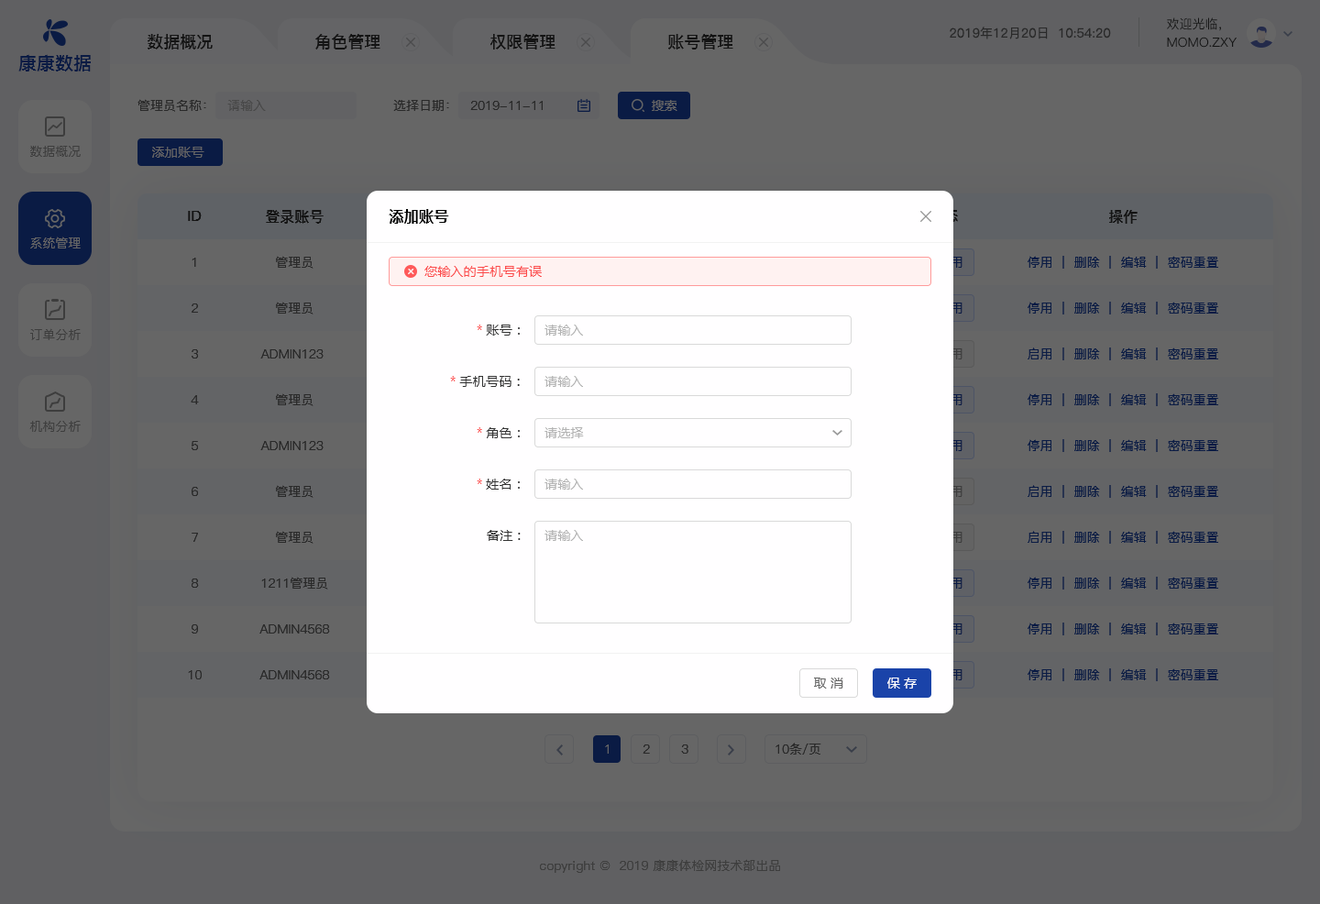
<style>
.page{position:relative;width:1320px;height:904px;background:#666666}
.page>*{position:absolute;margin:0}
.t1{font:12.8px "PingFang-SC-Medium";color:#141414;text-transform:uppercase}
.t2{font:12.8px "PingFang-SC-Regular";color:#292929}
.t3{font:16.5px "PingFang-SC-Bold";color:#141414;text-transform:uppercase}
.t4{font:18.3px "PingFangSC-Medium";color:#0a1b44;text-transform:uppercase}
.t5{font:12.8px "PingFang-SC-Medium";color:#292929}
.t6{font:12.8px "PingFang-SC-Medium";color:#484848}
.t7{font:12.8px "MicrosoftYaHei";letter-spacing:0.02em;color:#666666}
.t8{font:12.8px "PingFang-SC-Medium";color:#3d3d3d;text-transform:uppercase}
.t9{font:14.7px "PingFang-SC-Bold";color:#141414;text-transform:uppercase}
.t10{font:14.7px "MicrosoftYaHei-Bold";letter-spacing:0.02em;color:#000000}
.t11{font:12.8px "PingFang-SC-Medium";color:#666666;text-transform:uppercase}
.t12{font:12.8px "PingFang-SC-Medium";color:#292929;text-transform:uppercase}
.t13{font:12.8px "PingFang-SC-Medium";color:#0a1b44;text-transform:uppercase}
.t14{font:12.8px "MicrosoftYaHei";letter-spacing:0.02em;color:#fc4b4b}
.t15{font:12.8px "MicrosoftYaHei";letter-spacing:0.02em;color:#333333}
.t16{font:12.8px "MicrosoftYaHei";letter-spacing:0.02em;color:#b3b3b3}
.t17{font:12.8px "MicrosoftYaHei";letter-spacing:0.02em;color:#ffffff}
.t18{font:12.8px "PingFang-SC-Medium";color:#3d3d3d}
</style>
<div class="page">
<p class="t1" style="left:1167px;top:17px;width:54px;height:14px">欢迎光临，</p>
<p class="t2" style="left:949px;top:27px;width:162px;height:12px">2019年12月20日  10:54:20</p>
<p class="t3" style="left:148px;top:34px;width:65px;height:15px">数据概况</p>
<p class="t3" style="left:315px;top:34px;width:65px;height:15px">角色管理</p>
<p class="t3" style="left:490px;top:34px;width:65px;height:15px">权限管理</p>
<p class="t3" style="left:668px;top:34px;width:65px;height:15px">账号管理</p>
<p class="t1" style="left:1167px;top:37px;width:69px;height:11px">momo.zxy</p>
<p class="t4" style="left:18px;top:54px;width:73px;height:17px">康康数据</p>
<p class="t5" style="left:137px;top:99px;width:69px;height:13px">管理员名称：</p>
<p class="t6" style="left:227px;top:100px;width:39px;height:11px">请输入</p>
<p class="t5" style="left:393px;top:100px;width:56px;height:11px">选择日期：</p>
<p class="t5" style="left:470px;top:101px;width:73px;height:9px">2019-11-11</p>
<p class="t7" style="left:652px;top:100px;width:25px;height:11px">搜索</p>
<p class="t8" style="left:30px;top:146px;width:51px;height:11px">数据概况</p>
<p class="t7" style="left:152px;top:147px;width:52px;height:11px">添加账号</p>
<p class="t9" style="left:266px;top:210px;width:57px;height:14px">登录账号</p>
<p class="t10" style="left:389px;top:209px;width:60px;height:15px">添加账号</p>
<p class="t9" style="left:1109px;top:210px;width:28px;height:14px">操作</p>
<p class="t9" style="left:188px;top:211px;width:14px;height:10px">ID</p>
<p class="t11" style="left:30px;top:236px;width:51px;height:12px">系统管理</p>
<p class="t12" style="left:192px;top:258px;width:4px;height:9px">1</p>
<p class="t12" style="left:276px;top:256px;width:37px;height:13px">管理员</p>
<p class="t13" style="left:1027px;top:256px;width:191px;height:13px">停用  |  删除  |  编辑  |  密码重置</p>
<p class="t14" style="left:424px;top:266px;width:118px;height:11px">您输入的手机号有误</p>
<p class="t12" style="left:192px;top:303px;width:6px;height:10px">2</p>
<p class="t12" style="left:276px;top:302px;width:37px;height:12px">管理员</p>
<p class="t13" style="left:1027px;top:302px;width:191px;height:12px">停用  |  删除  |  编辑  |  密码重置</p>
<p class="t8" style="left:30px;top:328px;width:51px;height:12px">订单分析</p>
<p class="t15" style="left:477px;top:324px;width:43px;height:11px"><span class="t14">* </span>账号：</p>
<p class="t16" style="left:544px;top:324px;width:39px;height:11px">请输入</p>
<p class="t12" style="left:192px;top:349px;width:6px;height:9px">3</p>
<p class="t12" style="left:260px;top:349px;width:63px;height:9px">admin123</p>
<p class="t13" style="left:1027px;top:347px;width:191px;height:13px">启用  |  删除  |  编辑  |  密码重置</p>
<p class="t15" style="left:450px;top:376px;width:70px;height:11px"><span class="t14">* </span>手机号码：</p>
<p class="t16" style="left:544px;top:376px;width:39px;height:11px">请输入</p>
<p class="t12" style="left:191px;top:395px;width:8px;height:9px">4</p>
<p class="t12" style="left:276px;top:393px;width:37px;height:13px">管理员</p>
<p class="t13" style="left:1027px;top:393px;width:191px;height:13px">停用  |  删除  |  编辑  |  密码重置</p>
<p class="t8" style="left:29px;top:421px;width:52px;height:11px">机构分析</p>
<p class="t15" style="left:477px;top:427px;width:43px;height:11px"><span class="t14">* </span>角色：</p>
<p class="t16" style="left:544px;top:427px;width:40px;height:11px">请选择</p>
<p class="t12" style="left:192px;top:441px;width:6px;height:9px">5</p>
<p class="t12" style="left:260px;top:441px;width:63px;height:9px">admin123</p>
<p class="t13" style="left:1027px;top:439px;width:191px;height:13px">停用  |  删除  |  编辑  |  密码重置</p>
<p class="t12" style="left:276px;top:485px;width:37px;height:13px">管理员</p>
<p class="t15" style="left:477px;top:478px;width:43px;height:11px"><span class="t14">* </span>姓名：</p>
<p class="t16" style="left:544px;top:478px;width:39px;height:11px">请输入</p>
<p class="t13" style="left:1027px;top:485px;width:191px;height:13px">启用  |  删除  |  编辑  |  密码重置</p>
<p class="t12" style="left:192px;top:487px;width:6px;height:9px">6</p>
<p class="t12" style="left:192px;top:532px;width:6px;height:10px">7</p>
<p class="t12" style="left:276px;top:531px;width:37px;height:12px">管理员</p>
<p class="t15" style="left:487px;top:530px;width:34px;height:11px">备注：</p>
<p class="t16" style="left:544px;top:530px;width:39px;height:11px">请输入</p>
<p class="t13" style="left:1027px;top:531px;width:191px;height:12px">启用  |  删除  |  编辑  |  密码重置</p>
<p class="t12" style="left:192px;top:578px;width:7px;height:9px">8</p>
<p class="t12" style="left:261px;top:576px;width:67px;height:13px">1211管理员</p>
<p class="t13" style="left:1027px;top:576px;width:191px;height:13px">停用  |  删除  |  编辑  |  密码重置</p>
<p class="t12" style="left:192px;top:624px;width:6px;height:9px">9</p>
<p class="t12" style="left:259px;top:624px;width:71px;height:9px">admin4568</p>
<p class="t13" style="left:1027px;top:622px;width:191px;height:13px">停用  |  删除  |  编辑  |  密码重置</p>
<p class="t12" style="left:188px;top:670px;width:14px;height:9px">10</p>
<p class="t12" style="left:259px;top:670px;width:71px;height:9px">admin4568</p>
<p class="t7" style="left:814px;top:677px;width:29px;height:11px">取 消</p>
<p class="t17" style="left:887px;top:677px;width:29px;height:11px">保 存</p>
<p class="t13" style="left:1027px;top:668px;width:191px;height:13px">停用  |  删除  |  编辑  |  密码重置</p>
<p class="t11" style="left:605px;top:744px;width:4px;height:9px">1</p>
<p class="t12" style="left:642px;top:744px;width:8px;height:9px">2</p>
<p class="t12" style="left:681px;top:744px;width:7px;height:9px">3</p>
<p class="t12" style="left:775px;top:742px;width:46px;height:12px">10条/页</p>
<p class="t18" style="left:540px;top:859px;width:240px;height:13px">copyright ©  2019 康康体检网技术部出品</p>
</div>
